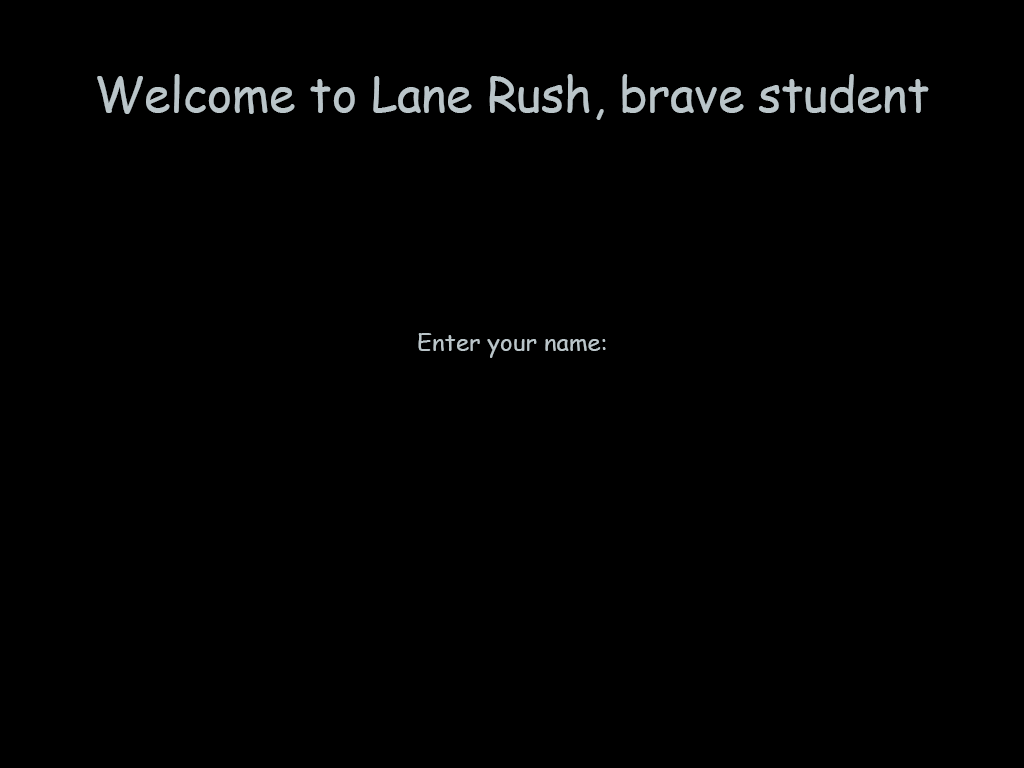
<style>
.page{position:relative;width:1024px;height:768px;background:#000000}
.page>*{position:absolute;margin:0}
.t1{font:47.5px "ComicSansMS";color:#bac5c9}
.t2{font:24px "ComicSansMS";color:#bac5c9}
</style>
<div class="page">
<p class="t1" style="left:97px;top:74px;width:832px;height:46px">Welcome to Lane Rush, brave student</p>
<p class="t2" style="left:418px;top:333px;width:188px;height:25px">Enter your name:</p>
</div>
